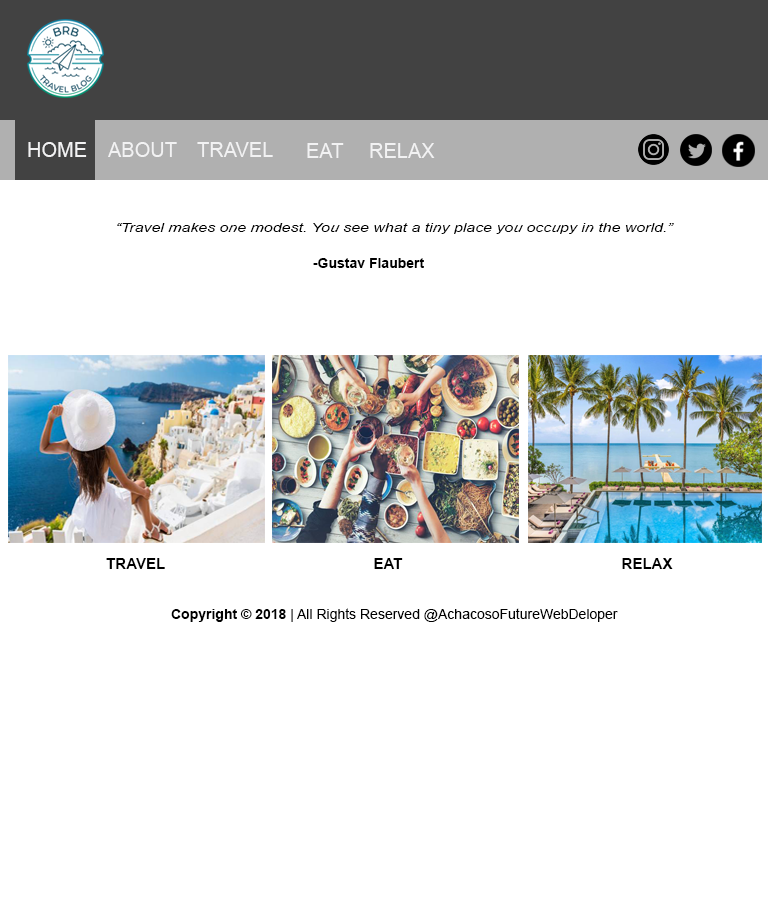
<style>
.page{position:relative;width:768px;height:900px;background:#ffffff}
.page>*{position:absolute;margin:0}
.t1{font:20px "ArialMT";color:#f2f2f3}
.t2{font:11.7px "Arial-ItalicMT";color:#000000;scale:1.36 1}
.t3{font:14px "Arial-BoldMT";color:#000000}
.t4{font:15px "Arial-BoldMT";color:#000000}
.t5{font:14px "ArialMT";color:#000000}
</style>
<div class="page">
<p class="t1" style="left:28px;top:142px;width:59px;height:15px">HOME</p>
<p class="t1" style="left:108px;top:142px;width:69px;height:15px">ABOUT</p>
<p class="t1" style="left:197px;top:142px;width:76px;height:15px">TRAVEL</p>
<p class="t1" style="left:307px;top:143px;width:37px;height:15px">EAT</p>
<p class="t1" style="left:370px;top:143px;width:65px;height:15px">RELAX</p>
<p class="t2" style="left:117px;top:223px;width:557px;height:11px">“Travel makes one modest. You see what a tiny place you occupy in the world.”</p>
<p class="t3" style="left:313px;top:258px;width:111px;height:10px">-Gustav Flaubert</p>
<p class="t4" style="left:106px;top:558px;width:59px;height:11px">TRAVEL</p>
<p class="t4" style="left:374px;top:558px;width:29px;height:11px">EAT</p>
<p class="t4" style="left:622px;top:558px;width:51px;height:11px">RELAX</p>
<p class="t5" style="left:171px;top:608px;width:447px;height:14px"><span class="t3">Copyright © 2018 </span>| All Rights Reserved @AchacosoFutureWebDeloper</p>
</div>
